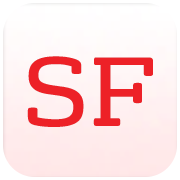
<style>
.page{position:relative;width:180px;height:180px}
.page>*{position:absolute;margin:0}
.t1{font:94.7px "FSRufus";color:#ed2127}
</style>
<div class="page">
<p class="t1" style="left:27px;top:56px;width:126px;height:71px">SF</p>
</div>
